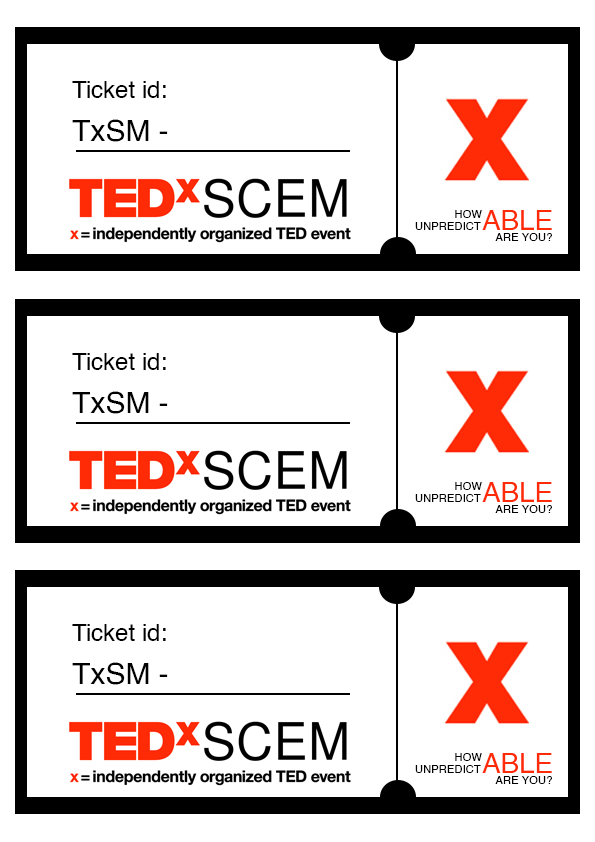
<style>
.page{position:relative;width:595px;height:842px;background:#ffffff}
.page>*{position:absolute;margin:0}
.t1{font:24px "Helvetica";color:#000000}
.t2{font:30px "Helvetica";color:#000000}
.t3{font:11.3px "Helvetica";color:#000000}
.t4{font:27.7px "Helvetica";color:#ff2b06}
</style>
<div class="page">
<p class="t1" style="left:72px;top:81px;width:94px;height:17px">Ticket id:</p>
<p class="t2" style="left:72px;top:119px;width:96px;height:23px">TxSM -</p>
<p class="t3" style="left:415px;top:222px;width:66px;height:8px">UNPREDICT</p>
<p class="t3" style="left:455px;top:210px;width:27px;height:8px">HOW</p>
<p class="t4" style="left:482px;top:210px;width:70px;height:20px">ABLE</p>
<p class="t3" style="left:495px;top:233px;width:57px;height:8px">ARE YOU?</p>
<p class="t1" style="left:72px;top:353px;width:94px;height:17px">Ticket id:</p>
<p class="t2" style="left:72px;top:391px;width:96px;height:23px">TxSM -</p>
<p class="t3" style="left:455px;top:482px;width:27px;height:8px">HOW</p>
<p class="t4" style="left:482px;top:482px;width:70px;height:20px">ABLE</p>
<p class="t3" style="left:415px;top:494px;width:66px;height:8px">UNPREDICT</p>
<p class="t3" style="left:495px;top:505px;width:57px;height:8px">ARE YOU?</p>
<p class="t1" style="left:72px;top:624px;width:94px;height:17px">Ticket id:</p>
<p class="t2" style="left:72px;top:662px;width:96px;height:23px">TxSM -</p>
<p class="t3" style="left:455px;top:753px;width:27px;height:8px">HOW</p>
<p class="t4" style="left:482px;top:753px;width:70px;height:20px">ABLE</p>
<p class="t3" style="left:415px;top:765px;width:66px;height:8px">UNPREDICT</p>
<p class="t3" style="left:495px;top:776px;width:57px;height:8px">ARE YOU?</p>
</div>
